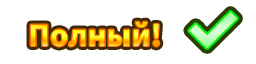
<style>
.page{position:relative;width:256px;height:64px;background:#ffffff}
.page>*{position:absolute;margin:0}
.t1{font:28.9px "Keifont"}
</style>
<div class="page">
<p class="t1" style="left:30px;top:21px;width:130px;height:26px">Полный!</p>
</div>
